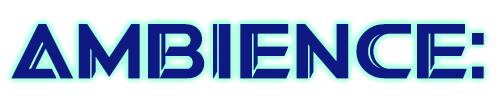
<style>
.page{position:relative;width:500px;height:100px;background:#ffffff}
.page>*{position:absolute;margin:0}
.t1{font:75px "SweraDemoShadowed";color:#0e1984;font-weight:bold}
</style>
<div class="page">
<p class="t1" style="left:11px;top:24px;width:473px;height:55px">Ambience:</p>
</div>
